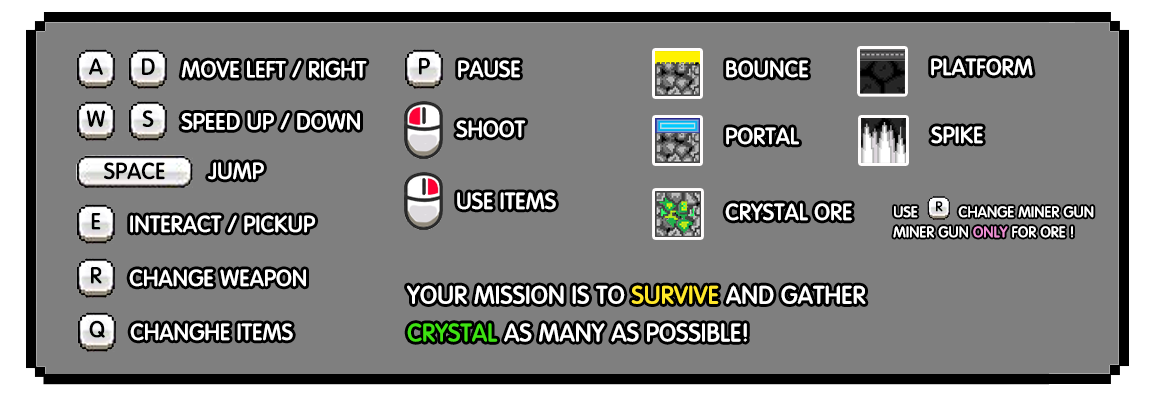
<style>
.page{position:relative;width:1160px;height:400px;background:#7f7f7f}
.page>*{position:absolute;margin:0}
.t1{font:22.3px "FZY3K--GBK1-0";color:#000000;font-weight:bold}
.t2{font:22.3px "FZY3K--GBK1-0";color:#ffffff;font-weight:bold}
.t3{font:22.3px "FZY3K--GBK1-0";color:#ffffff;text-transform:uppercase;font-weight:bold}
.t4{font:14.7px/20.1px "FZY3K--GBK1-0";color:#ffffff;text-transform:uppercase;font-weight:bold}
.t5{font:14.7px/20.1px "FZY3K--GBK1-0";color:#ec8ed2;text-transform:uppercase;font-weight:bold}
.t6{font:13.5px "FZY3K--GBK1-0";color:#000000;font-weight:bold}
.t7{font:24.3px/37.7px "FZY3K--GBK1-0";color:#ffffff;text-transform:uppercase;font-weight:bold}
.t8{font:24.3px/37.7px "FZY3K--GBK1-0";color:#ffe829;text-transform:uppercase;font-weight:bold}
.t9{font:24.3px/37.7px "FZY3K--GBK1-0";color:#3ee212;text-transform:uppercase;font-weight:bold}
</style>
<div class="page">
<p class="t1" style="left:89px;top:58px;width:14px;height:17px">A</p>
<p class="t1" style="left:142px;top:58px;width:13px;height:17px">D</p>
<p class="t2" style="left:181px;top:60px;width:186px;height:18px">MOVE LEFT / RIGHT</p>
<p class="t1" style="left:419px;top:58px;width:11px;height:17px">P</p>
<p class="t3" style="left:458px;top:60px;width:62px;height:18px">PAUSE</p>
<p class="t3" style="left:726px;top:60px;width:82px;height:18px">BOUNCE</p>
<p class="t3" style="left:931px;top:58px;width:102px;height:18px">PLATFORM</p>
<p class="t1" style="left:86px;top:110px;width:19px;height:17px">W</p>
<p class="t1" style="left:142px;top:110px;width:12px;height:17px">S</p>
<p class="t2" style="left:181px;top:113px;width:179px;height:17px">SPEED UP / DOWN</p>
<p class="t3" style="left:456px;top:120px;width:70px;height:18px">SHOOT</p>
<p class="t3" style="left:931px;top:126px;width:52px;height:18px">SPIKE</p>
<p class="t3" style="left:726px;top:127px;width:73px;height:18px">PORTAL</p>
<p class="t1" style="left:104px;top:162px;width:61px;height:18px">SPACE</p>
<p class="t2" style="left:208px;top:162px;width:56px;height:18px">JUMP</p>
<p class="t3" style="left:457px;top:192px;width:99px;height:18px">USE ITEMS</p>
<p class="t3" style="left:725px;top:203px;width:127px;height:18px">CRYSTAL ORE</p>
<p class="t4" style="left:893px;top:206px;width:201px;height:32px">USE          change miner gun<br>MINER GUN <span class="t5">only </span>for ore !</p>
<p class="t6" style="left:936px;top:201px;width:7px;height:11px">R</p>
<p class="t1" style="left:91px;top:213px;width:10px;height:17px">E</p>
<p class="t3" style="left:130px;top:215px;width:186px;height:18px">INTERACT / PICKUP</p>
<p class="t1" style="left:91px;top:267px;width:11px;height:17px">R</p>
<p class="t3" style="left:129px;top:269px;width:177px;height:18px">Change weapon</p>
<p class="t7" style="left:407px;top:285px;width:459px;height:57px">YOUR MISSION IS TO <span class="t8">SURVIVE </span>AND GATHER <br><span class="t9">CRYSTAL </span>AS MANY AS POSSIBLE!</p>
<p class="t1" style="left:89px;top:320px;width:16px;height:18px">Q</p>
<p class="t3" style="left:130px;top:323px;width:163px;height:18px">CHANGHE ITEMS</p>
</div>
